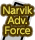
<style>
.page{position:relative;width:35px;height:40px;background:#4a3400}
.page>*{position:absolute;margin:0}
.t1{font:9px/10px "UDShinGoPro-Light";color:#e2d456;font-weight:bold}
</style>
<div class="page">
<p class="t1" style="left:3px;top:6px;width:30px;height:29px;text-align:center">Narvik<br>Adv.<br>Force</p>
</div>
